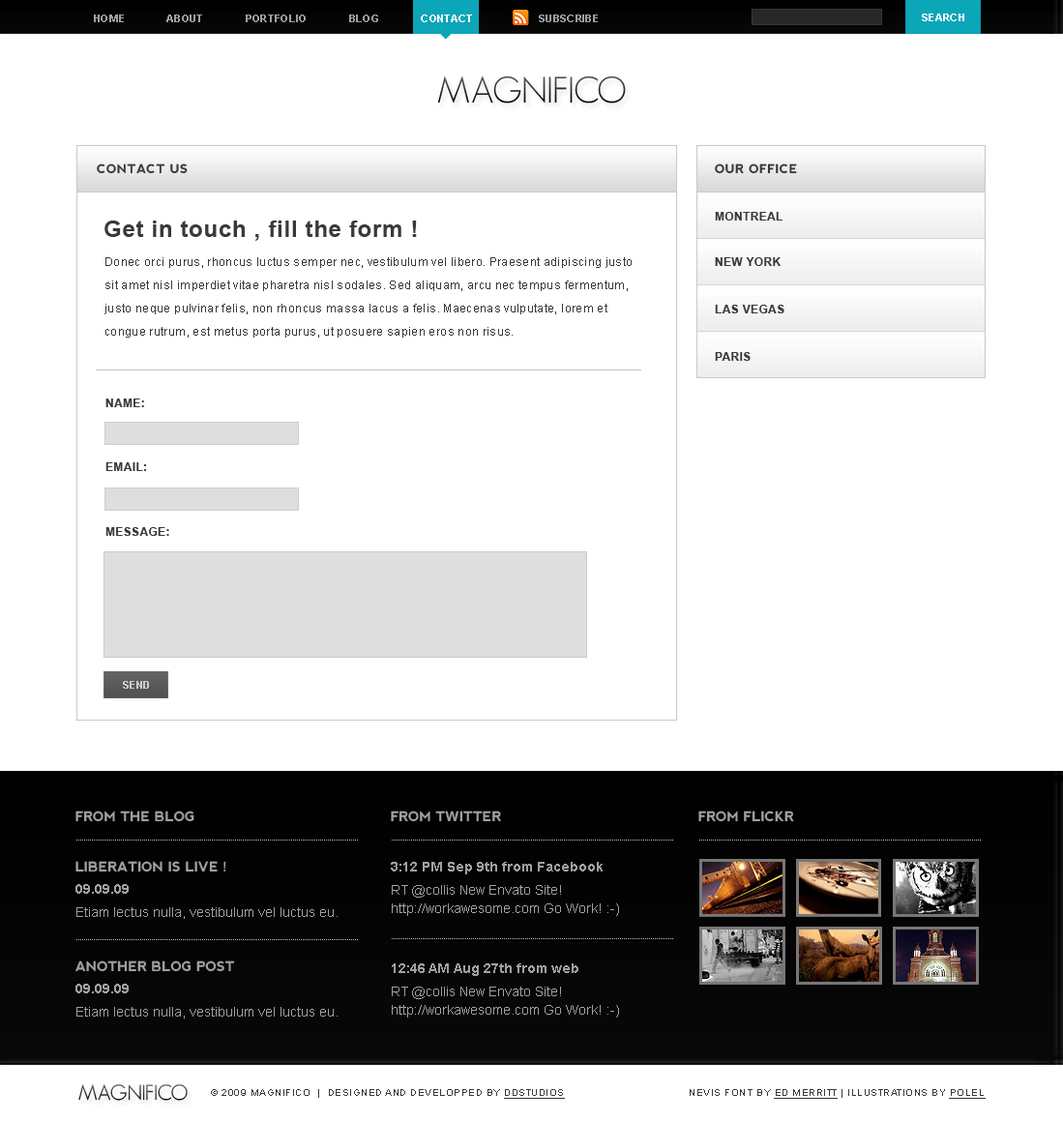
<style>
.page{position:relative;width:1063px;height:1122px;background:#ffffff}
.page>*{position:absolute;margin:0}
.t1{font:10.6px "Arial-BoldMT";letter-spacing:0.029em;color:#9f9f9f}
.t2{font:10.6px "Arial-BoldMT";letter-spacing:0.029em;color:#ffffff}
.t3{font:36.1px "GeosansLight";letter-spacing:0.029em}
.t4{font:12.4px "nevis-Bold";letter-spacing:0.029em;color:#292929}
.t5{font:23.2px "Arial-BoldMT";letter-spacing:0.029em;color:#292929}
.t6{font:11.6px "Arial-BoldMT";letter-spacing:0.029em;color:#292929}
.t7{font:11.6px/23.2px "ArialMT";letter-spacing:0.029em;color:#292929}
.t8{font:10.6px "Arial-BoldMT";letter-spacing:0.029em;color:#cccccc}
.t9{font:13.5px "nevis-Bold";color:#ababab}
.t10{font:13.5px "Arial-BoldMT";color:#ababab}
.t11{font:13.5px/18.7px "ArialMT";color:#ababab}
.t12{font:13.5px "ArialMT";color:#ababab}
.t13{font:20.9px "GeosansLight";letter-spacing:0.029em;color:#292929}
.t14{font:9.7px "ArialMT";letter-spacing:0.05em;color:#393939}
.t15{font:9.7px "Arial-BoldMT";letter-spacing:0.05em;color:#393939;text-decoration:underline}
.t16{font:9.7px "Arial-BoldMT";letter-spacing:0.05em;color:#393939}
</style>
<div class="page">
<p class="t1" style="left:94px;top:15px;width:378px;height:7px">HOME             ABOUT             PORTFOLIO             BLOG             <span class="t2">CONTACT</span></p>
<p class="t1" style="left:539px;top:15px;width:59px;height:7px">SUBSCRIBE</p>
<p class="t2" style="left:922px;top:14px;width:42px;height:7px">SEARCH</p>
<p class="t3" style="left:437px;top:75px;width:189px;height:28px">MAGNIFICO</p>
<p class="t4" style="left:97px;top:163px;width:91px;height:11px">CONTACT US</p>
<p class="t4" style="left:715px;top:163px;width:82px;height:11px">OUR OFFICE</p>
<p class="t5" style="left:104px;top:221px;width:313px;height:20px">Get in touch , fill the form !</p>
<p class="t6" style="left:715px;top:212px;width:68px;height:9px">MONTREAL</p>
<p class="t7" style="left:104px;top:257px;width:528px;height:81px">Donec orci purus, rhoncus luctus semper nec, vestibulum vel libero. Praesent adipiscing justo sit amet nisl imperdiet vitae pharetra nisl sodales. Sed aliquam, arcu nec tempus fermentum, justo neque pulvinar felis, non rhoncus massa lacus a felis. Maecenas vulputate, lorem et congue rutrum, est metus porta purus, ut posuere sapien eros non risus.</p>
<p class="t6" style="left:715px;top:257px;width:65px;height:9px">NEW YORK</p>
<p class="t6" style="left:715px;top:305px;width:69px;height:8px">LAS VEGAS</p>
<p class="t6" style="left:715px;top:352px;width:36px;height:9px">PARIS</p>
<p class="t6" style="left:105px;top:398px;width:39px;height:9px">NAME:</p>
<p class="t6" style="left:105px;top:462px;width:41px;height:9px">EMAIL:</p>
<p class="t6" style="left:105px;top:527px;width:64px;height:9px">MESSAGE:</p>
<p class="t8" style="left:123px;top:681px;width:26px;height:8px">SEND</p>
<p class="t9" style="left:75px;top:810px;width:119px;height:12px">FROM THE BLOG</p>
<p class="t9" style="left:391px;top:810px;width:110px;height:12px">FROM TWITTER</p>
<p class="t9" style="left:698px;top:810px;width:96px;height:12px">FROM FLICKR</p>
<p class="t9" style="left:75px;top:861px;width:151px;height:11px">LIBERATION IS LIVE !</p>
<p class="t10" style="left:391px;top:862px;width:212px;height:12px">3:12 PM Sep 9th from Facebook</p>
<p class="t10" style="left:75px;top:884px;width:54px;height:10px">09.09.09</p>
<p class="t11" style="left:392px;top:885px;width:227px;height:31px">RT @collis New Envato Site! http://workawesome.com Go Work! :-)</p>
<p class="t12" style="left:76px;top:907px;width:262px;height:12px">Etiam lectus nulla, vestibulum vel luctus eu.</p>
<p class="t9" style="left:75px;top:960px;width:160px;height:12px">ANOTHER BLOG POST</p>
<p class="t10" style="left:392px;top:963px;width:186px;height:13px">12:46 AM Aug 27th from web</p>
<p class="t10" style="left:75px;top:984px;width:54px;height:9px">09.09.09</p>
<p class="t11" style="left:392px;top:986px;width:227px;height:31px">RT @collis New Envato Site! http://workawesome.com Go Work! :-)</p>
<p class="t12" style="left:76px;top:1007px;width:262px;height:11px">Etiam lectus nulla, vestibulum vel luctus eu.</p>
<p class="t13" style="left:78px;top:1084px;width:110px;height:17px">MAGNIFICO</p>
<p class="t14" style="left:211px;top:1089px;width:354px;height:10px">© 2009 MAGNIFICO  |  DESIGNED AND DEVELOPPED BY <span class="t15">DDSTUDIOS</span></p>
<p class="t16" style="left:690px;top:1089px;width:296px;height:10px"><span class="t14">NEVIS FONT BY </span><span class="t15">ED MERRITT</span> | ILLUSTRATIONS BY <span class="t15">POLEL</span></p>
</div>
